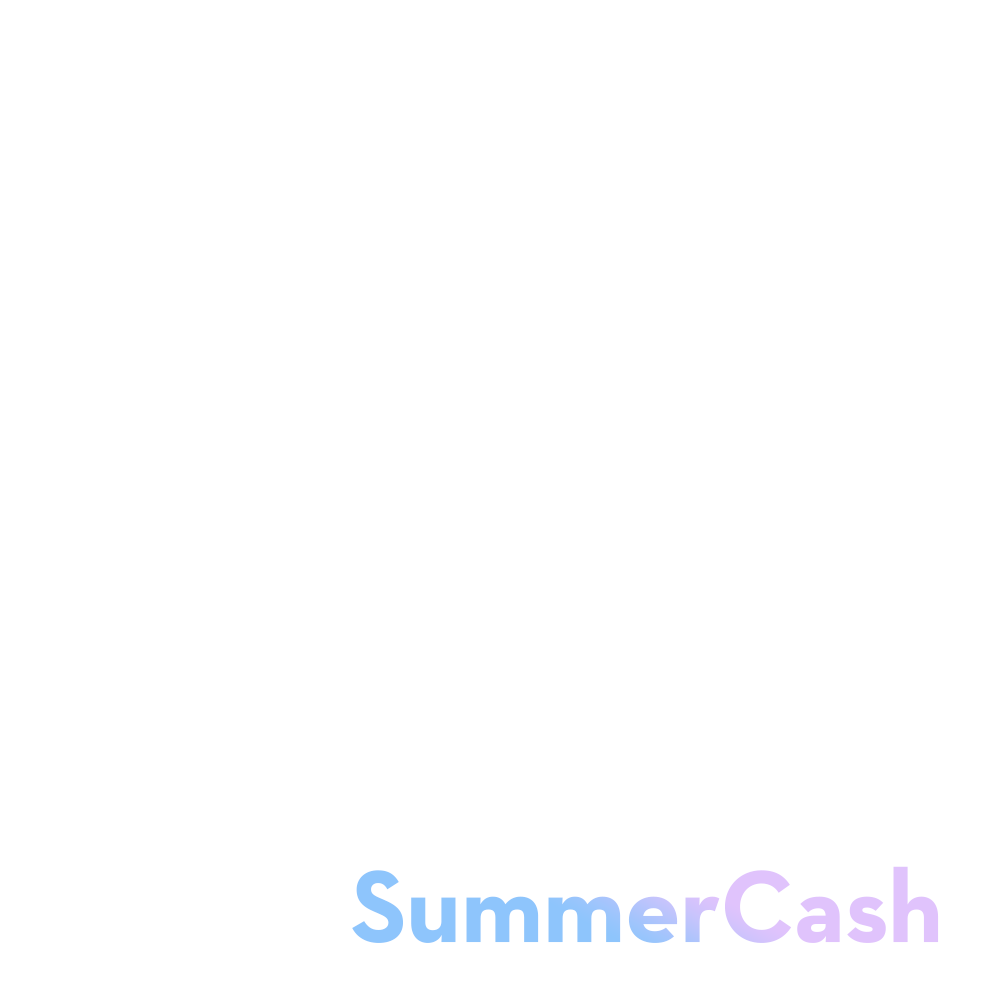
<style>
.page{position:relative;width:1000px;height:1000px;background:#ffffff}
.page>*{position:absolute;margin:0}
.t1{font:104.2px "NeutraText-Bold";letter-spacing:-0.005em}
</style>
<div class="page">
<p class="t1" style="left:352px;top:866px;width:587px;height:77px">SummerCash</p>
</div>
